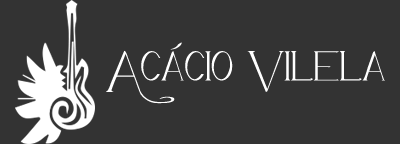
<style>
.page{position:relative;width:400px;height:144px;background:#333333}
.page>*{position:absolute;margin:0}
.t1{font:58.8px "Avanti-Serif-Regular";color:#ffffff}
</style>
<div class="page">
<p class="t1" style="left:106px;top:42px;width:279px;height:62px">Acácio Vilela</p>
</div>
